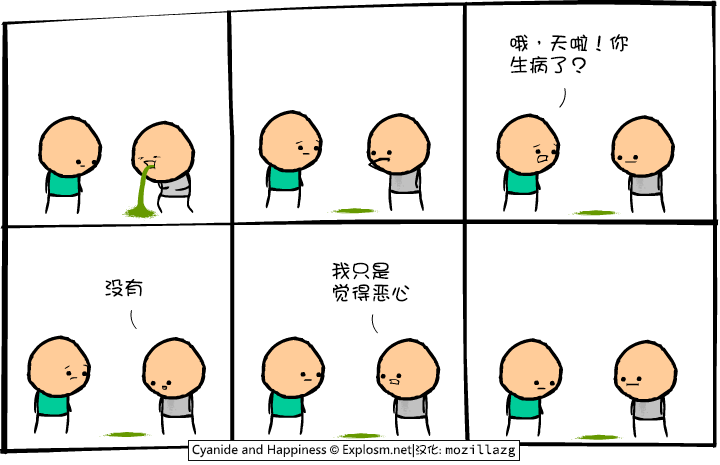
<style>
.page{position:relative;width:720px;height:465px;background:#ffffff}
.page>*{position:absolute;margin:0}
.t1{font:20px/22px "DFGirl";color:#000000}
.t2{font:20px "DFGirl";color:#000000}
</style>
<div class="page">
<p class="t1" style="left:510px;top:34px;width:118px;height:40px">哦，天啦！你<br>生病了？</p>
<p class="t1" style="left:331px;top:262px;width:79px;height:40px">我只是<br>觉得恶心</p>
<p class="t2" style="left:105px;top:278px;width:38px;height:19px">没有</p>
</div>
